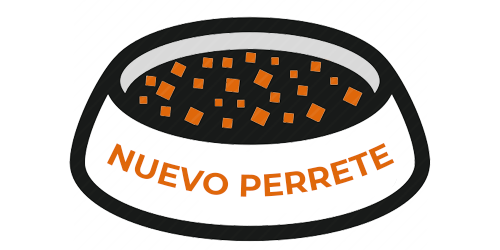
<style>
.page{position:relative;width:500px;height:250px;background:#ffffff}
.page>*{position:absolute;margin:0}
.t1{font:30px "Montserrat-Bold";color:#df670a}
</style>
<div class="page">
<p class="t1" style="left:107px;top:143px;width:288px;height:54px">NUEVO PERRETE</p>
</div>
